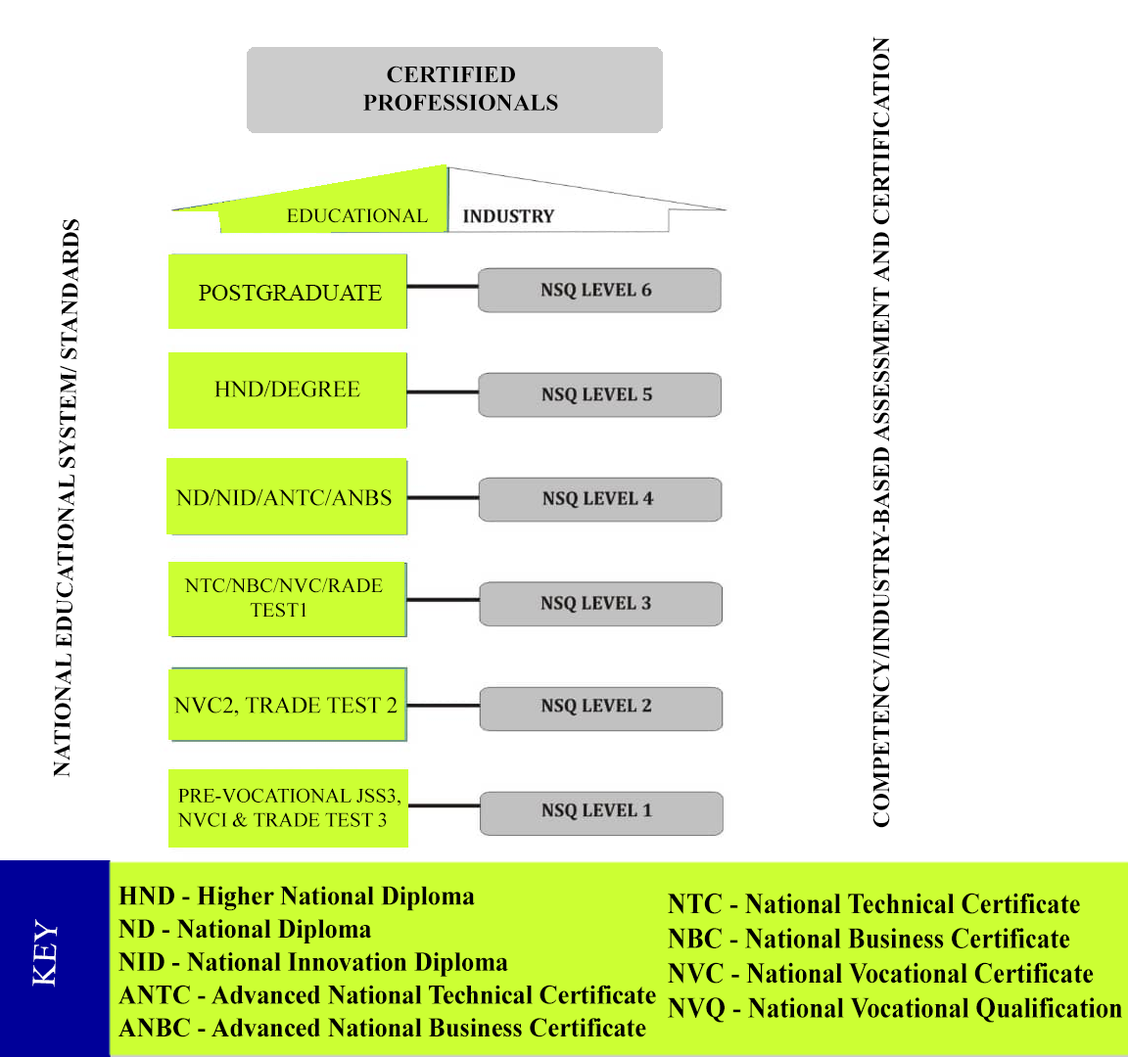
<style>
.page{position:relative;width:1128px;height:1057px;background:#ffffff}
.page>*{position:absolute;margin:0}
.t1{font:23.5px "TimesNewRomanPS-BoldMT";color:#000000}
.t2{font:20.1px "TimesNewRomanPSMT";color:#000000}
.t3{font:23.4px "TimesNewRomanPSMT";color:#000000}
.t4{font:22.9px "TimesNewRomanPSMT";color:#000000}
.t5{font:20.4px "TimesNewRomanPSMT";color:#000000}
.t6{font:20.2px "TimesNewRomanPSMT";color:#000000}
.t7{font:27.5px "TimesNewRomanPS-BoldMT";color:#000000;scale:0.94 1}
.t8{font:29px "TimesNewRomanPS-BoldMT";color:#000000;scale:0.91 1}
.t9{font:32.9px "TimesNewRomanPSMT";color:#ffffff}
</style>
<div class="page">
<p class="t1" style="left:872px;top:36px;width:18px;height:792px;rotate:-90deg">COMPETENCY/INDUSTRY-BASED ASSESSMENT AND CERTIFICATION</p>
<p class="t1" style="left:363px;top:66px;width:195px;height:45px;text-align:justify">CERTIFIED <br>PROFESSIONALS</p>
<p class="t2" style="left:286px;top:209px;width:142px;height:14px">EDUCATIONAL</p>
<p class="t1" style="left:53px;top:219px;width:26px;height:559px;rotate:-89deg">NATIONAL EDUCATIONAL SYSTEM/ STANDARDS</p>
<p class="t3" style="left:199px;top:285px;width:183px;height:16px">POSTGRADUATE</p>
<p class="t4" style="left:214px;top:380px;width:146px;height:17px">HND/DEGREE</p>
<p class="t4" style="left:175px;top:489px;width:217px;height:17px">ND/NID/ANTC/ANBS</p>
<p class="t5" style="left:184px;top:578px;width:199px;height:40px;text-align:justify">NTC/NBC/NVC/RADE<br>     TEST1</p>
<p class="t4" style="left:173px;top:697px;width:224px;height:20px">NVC2, TRADE TEST 2</p>
<p class="t6" style="left:177px;top:788px;width:223px;height:39px;text-align:justify">PRE-VOCATIONAL JSS3,<br>NVCI &amp; TRADE TEST 3</p>
<p class="t7" style="left:117px;top:886px;width:539px;height:152px;text-align:justify">HND - Higher National Diploma<br>ND - National Diploma<br>NID - National Innovation Diploma<br>ANTC - Advanced National Technical Certificate <br>ANBC - Advanced National Business Certificate</p>
<p class="t8" style="left:668px;top:893px;width:454px;height:130px;text-align:justify">NTC - National Technical Certificate<br>NBC - National Business Certificate<br>NVC - National Vocational Certificate<br>NVQ - National Vocational Qualification</p>
<p class="t9" style="left:32px;top:919px;width:26px;height:69px;rotate:-87deg">KEY</p>
</div>
